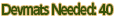
<style>
.page{position:relative;width:115px;height:18px;background:#ffffff}
.page>*{position:absolute;margin:0}
.t1{font:14px "UDShinGoPro-Bold";letter-spacing:-0.08em;color:#375309;scale:0.85 1}
</style>
<div class="page">
<p class="t1" style="left:2px;top:2px;width:111px;height:13px">Devmats Needed: 40</p>
</div>
